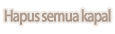
<style>
.page{position:relative;width:115px;height:34px;background:#ffffff}
.page>*{position:absolute;margin:0}
.t1{font:15px "KozGoPr6N-Medium";letter-spacing:-0.08em;color:#b8a89c;font-weight:bold;scale:0.9 1}
</style>
<div class="page">
<p class="t1" style="left:4px;top:9px;width:107px;height:16px">Hapus semua kapal</p>
</div>
